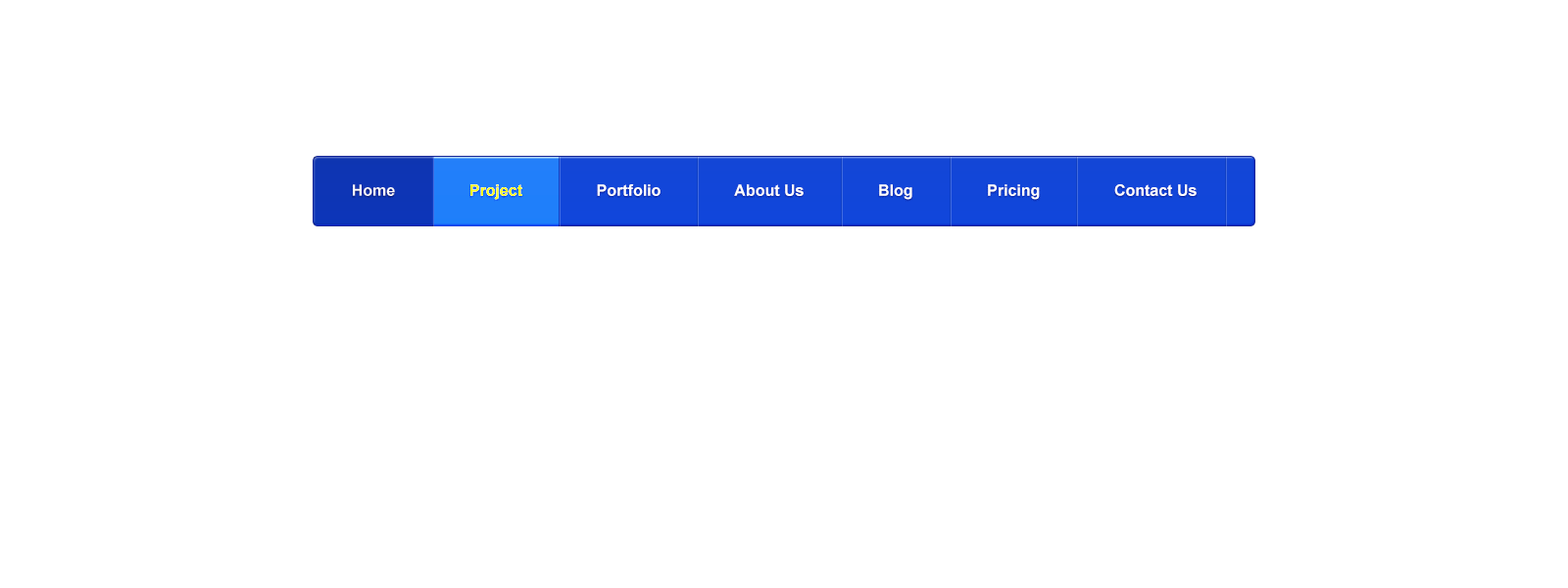
<style>
.page{position:relative;width:1568px;height:588px;background:#ffffff}
.page>*{position:absolute;margin:0}
.t1{font:15.7px "Arial-BoldMT";color:#ffffff}
.t2{font:15.7px "Arial-BoldMT";color:#efec0e}
</style>
<div class="page">
<p class="t1" style="left:353px;top:184px;width:844px;height:16px">Home                 <span class="t2">Project</span>                 Portfolio                 About Us                 Blog                 Pricing                 Contact Us</p>
</div>
